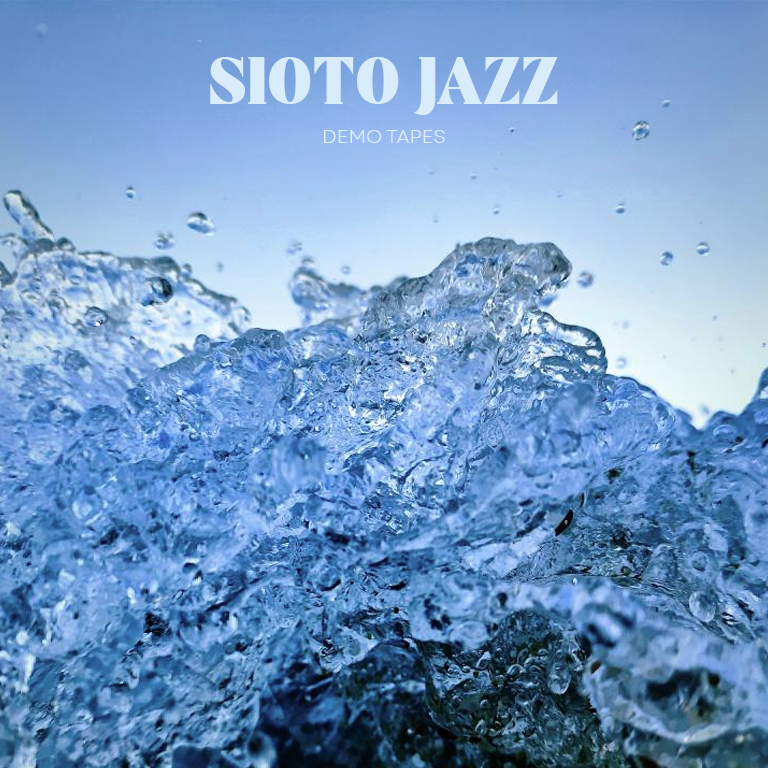
<style>
.page{position:relative;width:768px;height:768px}
.page>*{position:absolute;margin:0}
.t1{font:67.3px "Astrella-Regular";color:#d8ecfb}
.t2{font:19.2px "Garet-Book";color:#deeffa}
</style>
<div class="page">
<p class="t1" style="left:210px;top:57px;width:348px;height:58px">SIOTO JAZZ</p>
<p class="t2" style="left:324px;top:130px;width:121px;height:13px">DEMO TAPES</p>
</div>
